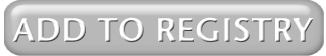
<style>
.page{position:relative;width:326px;height:56px;background:#b8b8b8}
.page>*{position:absolute;margin:0}
.t1{font:33.3px "StoneSans-Semibold";letter-spacing:0.005em;color:#ffffff}
</style>
<div class="page">
<p class="t1" style="left:12px;top:17px;width:302px;height:26px">ADD TO REGISTRY</p>
</div>
